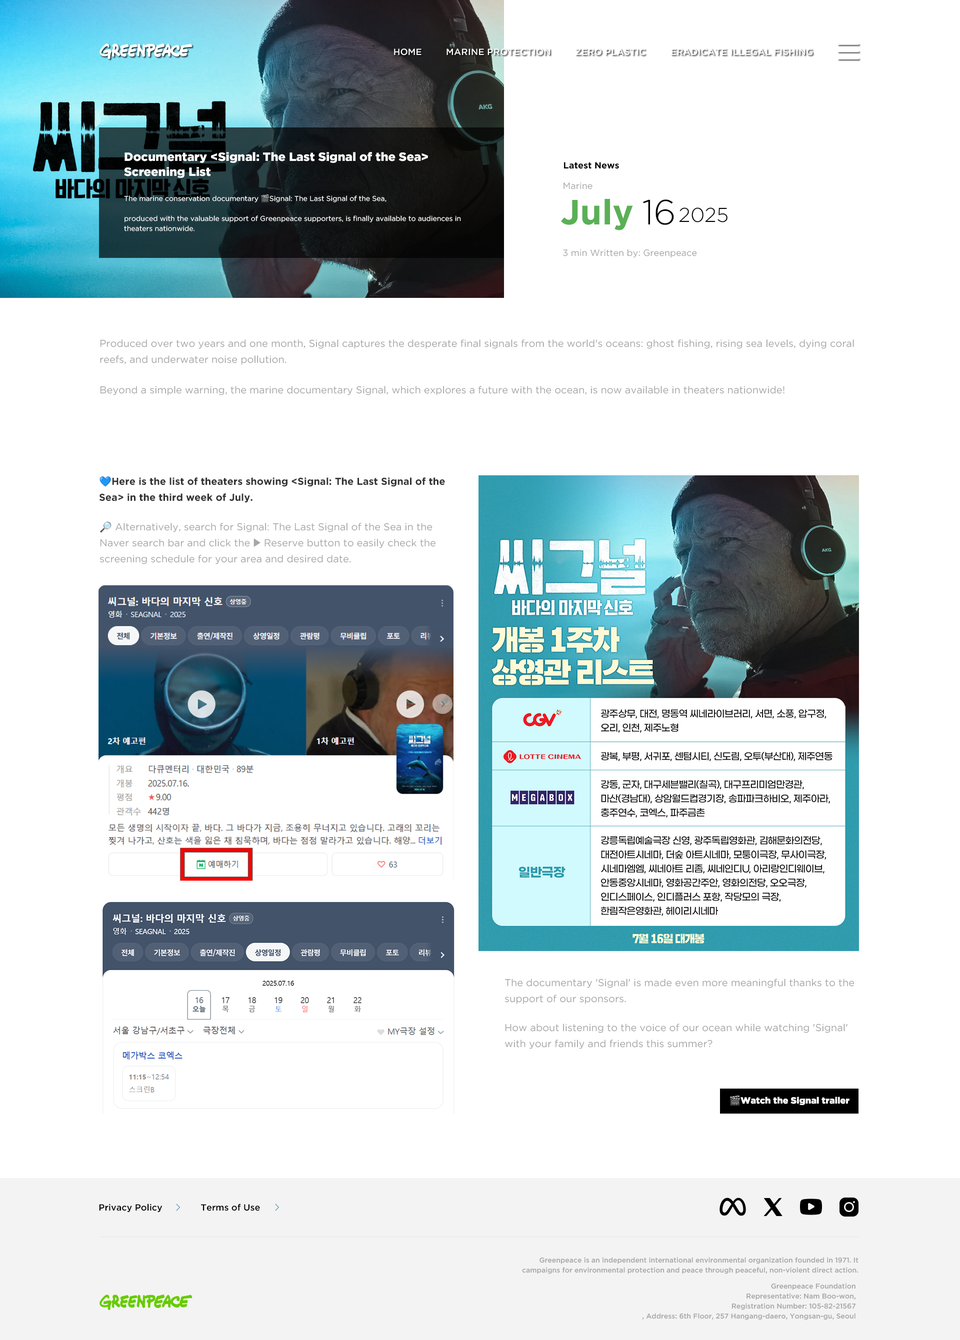
<style>
.page{position:relative;width:960px;height:1340px;background:#ffffff}
.page>*{position:absolute;margin:0}
.t1{font:9px "GothamPro-Medium";color:#ffffff}
.t2{font:9px "GothamPro-Medium";color:#ffffff;text-transform:uppercase}
.t3{font:12px/15px "GothamPro-Black";color:#ffffff}
.t4{font:9px "GothamPro-Bold";color:#000000}
.t5{font:9px "GothamPro";color:#a6a6a6}
.t6{font:7px/10px "GothamPro";color:#ffffff}
.t7{font:7px/10px "NotoColorEmoji-SVG";color:#ffffff}
.t8{font:35px "GothamPro-Bold";color:#5ab056}
.t9{font:35px "GothamPro-Light";color:#000000}
.t10{font:20px "GothamPro-Light";color:#000000}
.t11{font:10px/16px "GothamPro";color:#a6a6a6}
.t12{font:10px "GothamPro";color:#a6a6a6}
.t13{font:9px "GothamPro-Medium";color:#000000}
.t14{font:7px/10px "GothamPro-Medium";color:#a6a6a6}
</style>
<div class="page">
<p class="t1" style="left:394px;top:48px;width:28px;height:8px">HOME</p>
<p class="t2" style="left:446px;top:48px;width:104px;height:8px">Marine protection</p>
<p class="t2" style="left:576px;top:48px;width:70px;height:8px">Zero plastic</p>
<p class="t2" style="left:671px;top:48px;width:141px;height:8px">Eradicate illegal fishing</p>
<p class="t3" style="left:124px;top:152px;width:304px;height:26px">Documentary &lt;Signal: The Last Signal of the Sea&gt; Screening List</p>
<p class="t4" style="left:564px;top:162px;width:55px;height:7px">Latest News</p>
<p class="t5" style="left:564px;top:182px;width:28px;height:8px">Marine</p>
<p class="t6" style="left:124px;top:194px;width:337px;height:38px">The marine conservation documentary <span class="t7">🎬</span>Signal: The Last Signal of the Sea,<br><br>produced with the valuable support of Greenpeace supporters, is finally available to audiences in theaters nationwide.</p>
<p class="t8" style="left:561px;top:199px;width:72px;height:31px">July</p>
<p class="t9" style="left:643px;top:200px;width:31px;height:25px">16</p>
<p class="t10" style="left:679px;top:208px;width:49px;height:14px">2025</p>
<p class="t5" style="left:563px;top:249px;width:134px;height:9px">3 min Written by: Greenpeace</p>
<p class="t11" style="left:100px;top:340px;width:754px;height:25px">Produced over two years and one month, Signal captures the desperate final signals from the world's oceans: ghost fishing, rising sea levels, dying coral reefs, and underwater noise pollution.</p>
<p class="t12" style="left:100px;top:386px;width:684px;height:10px">Beyond a simple warning, the marine documentary Signal, which explores a future with the ocean, is now available in theaters nationwide!</p>
<p class="t11" style="left:504px;top:979px;width:350px;height:25px">The documentary 'Signal' is made even more meaningful thanks to the support of our sponsors.</p>
<p class="t11" style="left:505px;top:1024px;width:343px;height:26px">How about listening to the voice of our ocean while watching 'Signal' with your family and friends this summer?</p>
<p class="t13" style="left:99px;top:1204px;width:63px;height:8px">Privacy Policy</p>
<p class="t13" style="left:201px;top:1204px;width:59px;height:8px">Terms of Use</p>
<p class="t14" style="left:522px;top:1258px;width:336px;height:16px;text-align:right">Greenpeace is an independent international environmental organization founded in 1971. It campaigns for environmental protection and peace through peaceful, non-violent direct action.</p>
<p class="t14" style="left:642px;top:1284px;width:214px;height:36px;text-align:right">Greenpeace Foundation<br>Representative: Nam Boo-won,<br>Registration Number: 105-82-21567<br>, Address: 6th Floor, 257 Hangang-daero, Yongsan-gu, Seoul</p>
</div>
